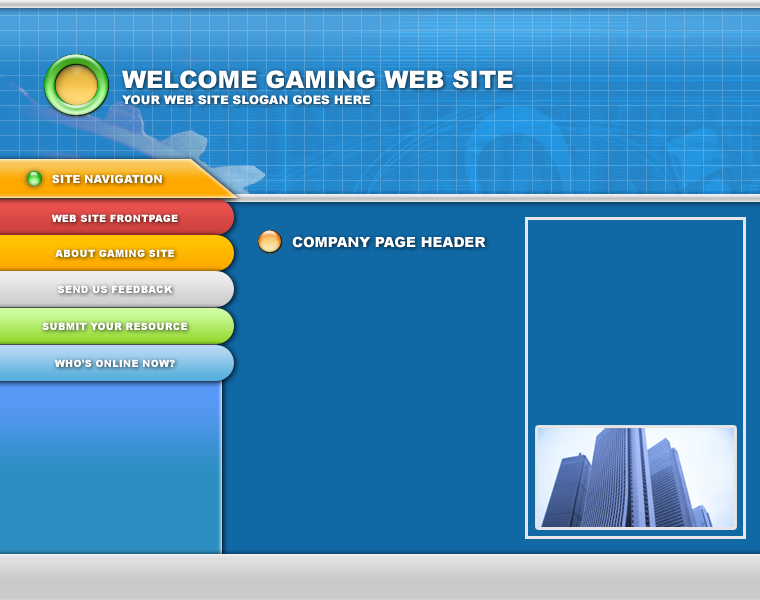
<style>
.page{position:relative;width:760px;height:600px;background:#1068a5}
.page>*{position:absolute;margin:0}
.t1{font:24px "Arial-Black";color:#ffffff}
.t2{font:12px "Arial-Black";color:#ffffff}
.t3{font:11px "Arial-Black";letter-spacing:0.01em;color:#ffffff}
.t4{font:10px "Arial-Black";letter-spacing:0.01em;color:#ffffff}
.t5{font:14px "Arial-Black";color:#ffffff}
</style>
<div class="page">
<p class="t1" style="left:122px;top:70px;width:391px;height:19px">WELCOME GAMING WEB SITE</p>
<p class="t2" style="left:122px;top:95px;width:248px;height:10px">YOUR WEB SITE SLOGAN GOES HERE</p>
<p class="t3" style="left:52px;top:174px;width:110px;height:10px">SITE NAVIGATION</p>
<p class="t4" style="left:51px;top:214px;width:127px;height:8px">WEB SITE FRONTPAGE</p>
<p class="t5" style="left:292px;top:236px;width:194px;height:12px">COMPANY PAGE HEADER</p>
<p class="t4" style="left:55px;top:249px;width:119px;height:8px">ABOUT GAMING SITE</p>
<p class="t4" style="left:58px;top:285px;width:115px;height:8px">SEND US FEEDBACK</p>
<p class="t4" style="left:42px;top:322px;width:145px;height:8px">SUBMIT YOUR RESOURCE</p>
<p class="t4" style="left:54px;top:359px;width:121px;height:8px">WHO’S ONLINE NOW?</p>
</div>
